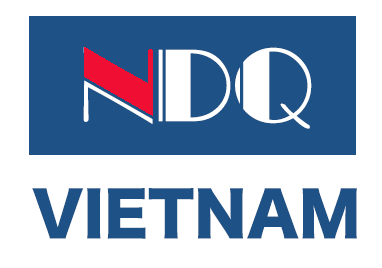
<style>
.page{position:relative;width:382px;height:268px;background:#ffffff}
.page>*{position:absolute;margin:0}
.t1{font:96px "VNI-Top";color:#ffffff}
.t2{font:60px "HiraKakuStd-W8";color:#1e5185}
</style>
<div class="page">
<p class="t1" style="left:83px;top:47px;width:229px;height:82px">NDQ</p>
<p class="t2" style="left:32px;top:188px;width:325px;height:51px">VIETNAM</p>
</div>
